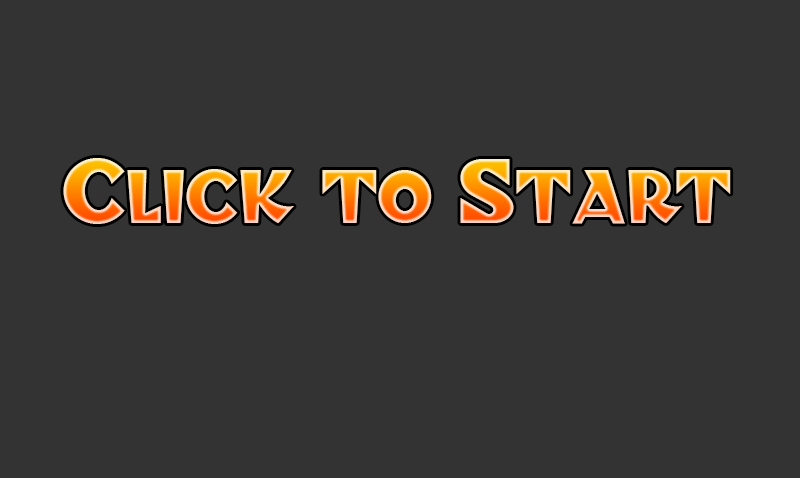
<style>
.page{position:relative;width:800px;height:478px;background:#333333}
.page>*{position:absolute;margin:0}
.t1{font:85.9px "BlitzkriegNF"}
</style>
<div class="page">
<p class="t1" style="left:63px;top:158px;width:668px;height:66px">Click to Start</p>
</div>
